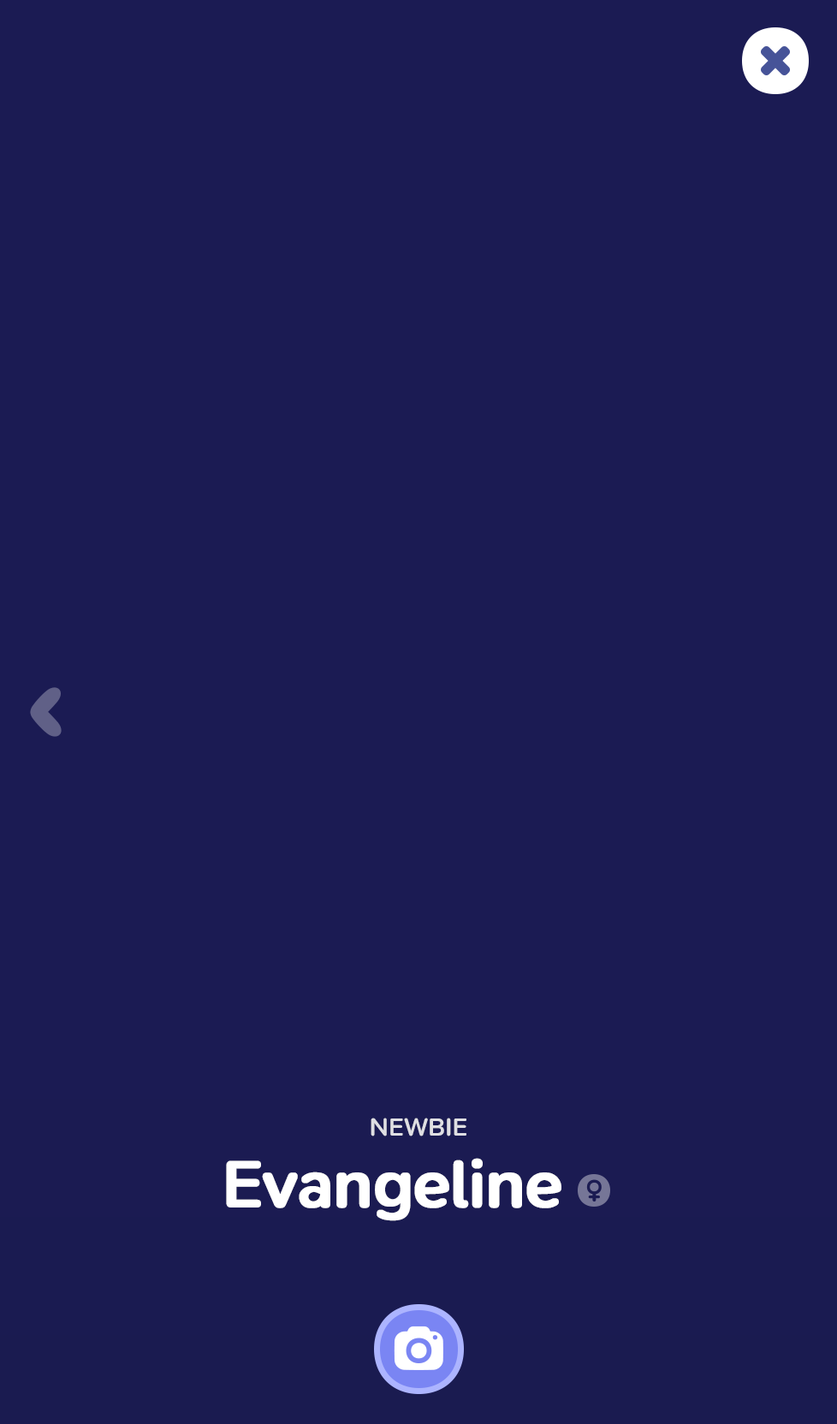
<style>
.page{position:relative;width:837px;height:1424px;background:#1b1b53}
.page>*{position:absolute;margin:0}
.t1{font:25.7px "SNPro-SemiBold";letter-spacing:-0.01em;color:#dfdfe3;text-transform:uppercase}
.t2{font:68.5px "SNPro-SemiBold";letter-spacing:-0.01em;color:#ffffff;font-weight:bold}
</style>
<div class="page">
<p class="t1" style="left:371px;top:1118px;width:96px;height:19px">Newbie</p>
<p class="t2" style="left:226px;top:1158px;width:336px;height:64px">Evangeline</p>
</div>
